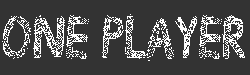
<style>
.page{position:relative;width:250px;height:75px;background:#333333}
.page>*{position:absolute;margin:0}
.t1{font:58.8px "Drawing-Guides";color:#ffffff;scale:0.89 1}
</style>
<div class="page">
<p class="t1" style="left:2px;top:14px;width:243px;height:47px">one player</p>
</div>
